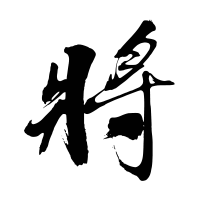
<style>
.page{position:relative;width:200px;height:200px;background:#ffffff}
.page>*{position:absolute;margin:0}
.t1{font:166.7px "YUWEIXSF2019";color:#010101}
</style>
<div class="page">
<p class="t1" style="left:24px;top:19px;width:151px;height:162px">将</p>
</div>
